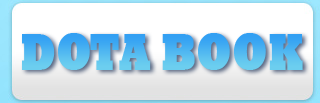
<style>
.page{position:relative;width:320px;height:103px;background:#ffffff}
.page>*{position:absolute;margin:0}
.t1{font:52px "Rockwell-ExtraBold";text-transform:uppercase;font-weight:bold;scale:0.77 1}
</style>
<div class="page">
<p class="t1" style="left:22px;top:33px;width:281px;height:37px">Dota Book</p>
</div>
